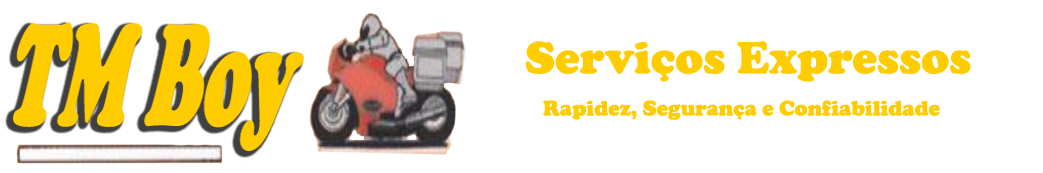
<style>
.page{position:relative;width:1043px;height:173px;background:#ffffff}
.page>*{position:absolute;margin:0}
.t1{font:46.8px "CooperBlack";color:#ffcc00}
.t2{font:22px "CooperBlack";color:#ffcc00}
</style>
<div class="page">
<p class="t1" style="left:525px;top:41px;width:446px;height:41px">Serviços Expressos</p>
<p class="t2" style="left:543px;top:100px;width:397px;height:20px">Rapidez, Segurança e Confiabilidade</p>
</div>
